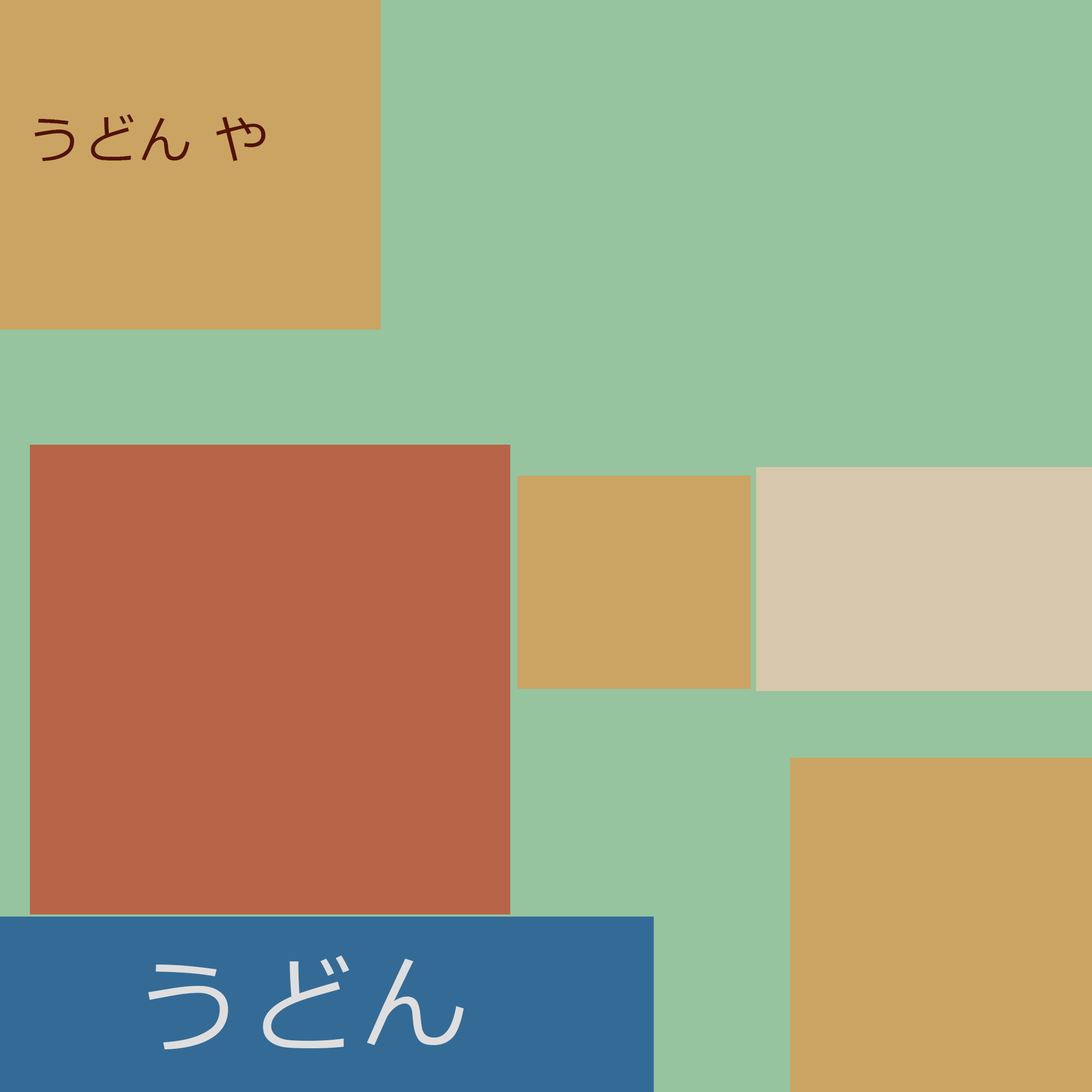
<style>
.page{position:relative;width:1092px;height:1092px;background:#95c49e}
.page>*{position:absolute;margin:0}
.t1{font:52.7px "Meiryo";letter-spacing:0.05em;color:#521300}
.t2{font:106.6px "Meiryo";letter-spacing:0.05em;color:#dedede}
</style>
<div class="page">
<p class="t1" style="left:35px;top:114px;width:231px;height:47px">うどん や</p>
<p class="t2" style="left:148px;top:955px;width:201px;height:94px">うど</p>
<p class="t2" style="left:367px;top:959px;width:97px;height:86px">ん</p>
</div>
